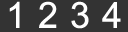
<style>
.page{position:relative;width:128px;height:32px;background:#333333}
.page>*{position:absolute;margin:0}
.t1{font:36px "ArialMT";color:#ffffff}
</style>
<div class="page">
<p class="t1" style="left:9px;top:1px;width:11px;height:27px">1</p>
<p class="t1" style="left:39px;top:1px;width:18px;height:27px">2</p>
<p class="t1" style="left:71px;top:1px;width:18px;height:28px">3</p>
<p class="t1" style="left:102px;top:2px;width:19px;height:26px">4</p>
</div>
